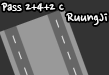
<style>
.page{position:relative;width:109px;height:75px;background:#333333}
.page>*{position:absolute;margin:0}
.t1{font:14px "NanumPen";color:#ffffff}
.t2{font:16px "NanumPen";color:#ffffff}
</style>
<div class="page">
<p class="t1" style="left:1px;top:2px;width:63px;height:10px">Pass 2+4+2 C</p>
<p class="t2" style="left:66px;top:13px;width:42px;height:12px">RuungJi</p>
</div>
